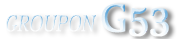
<style>
.page{position:relative;width:177px;height:39px;background:#ffffff}
.page>*{position:absolute;margin:0}
.t1{font:47px "Nyala-Regular";letter-spacing:-0.005em;text-transform:uppercase;font-weight:bold;scale:0.94 1}
.t2{font:21.4px "KozMinPro-ExtraLight";letter-spacing:-0.005em;font-weight:bold;font-style:italic;scale:0.87 1}
</style>
<div class="page">
<p class="t1" style="left:101px;top:3px;width:68px;height:34px">G53</p>
<p class="t2" style="left:6px;top:15px;width:90px;height:17px">GROUPON</p>
</div>
